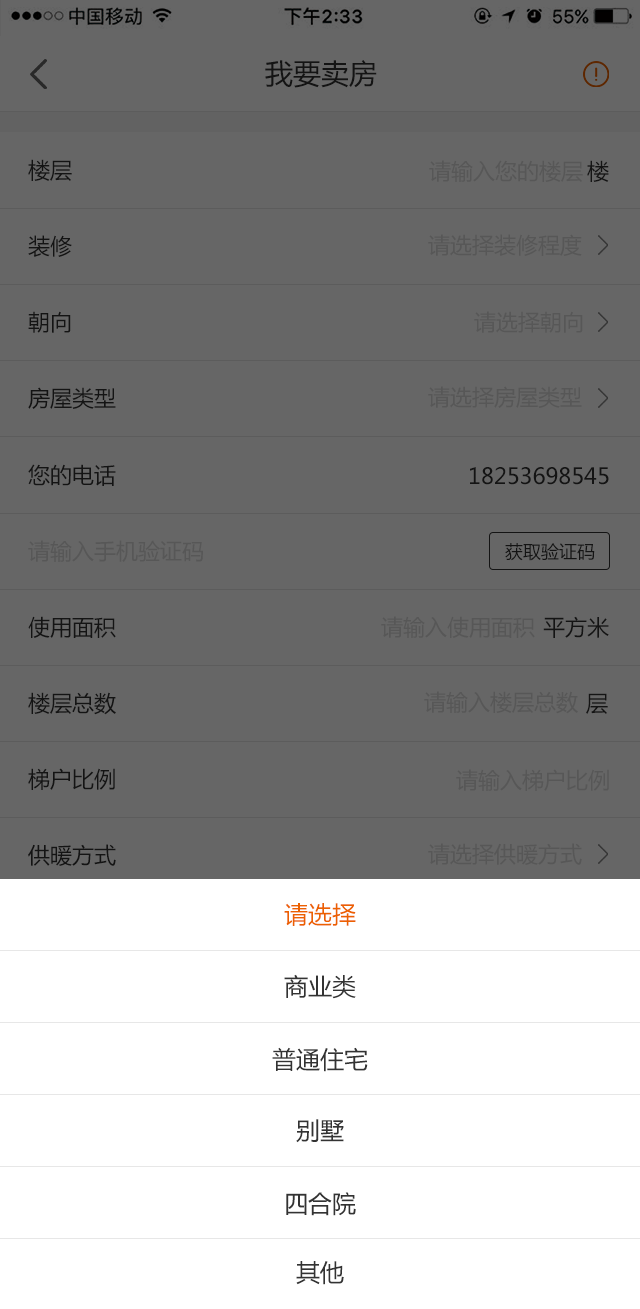
<style>
.page{position:relative;width:640px;height:1309px;background:#666666}
.page>*{position:absolute;margin:0}
.t1{font:28px "MicrosoftYaHei";color:#141414}
.t2{font:22px "MicrosoftYaHei";color:#141414}
.t3{font:22px "MicrosoftYaHei";color:#575757}
.t4{font:18px "MicrosoftYaHei";color:#141414}
.t5{font:24px "MicrosoftYaHei";color:#ec6100}
.t6{font:24px "MicrosoftYaHei";color:#333333}
</style>
<div class="page">
<p class="t1" style="left:265px;top:60px;width:112px;height:28px">我要卖房</p>
<p class="t2" style="left:28px;top:159px;width:44px;height:22px">楼层</p>
<p class="t3" style="left:429px;top:160px;width:154px;height:22px">请输入您的楼层</p>
<p class="t2" style="left:587px;top:160px;width:22px;height:22px">楼</p>
<p class="t2" style="left:28px;top:235px;width:44px;height:22px">装修</p>
<p class="t3" style="left:428px;top:234px;width:154px;height:22px">请选择装修程度</p>
<p class="t2" style="left:28px;top:311px;width:43px;height:22px">朝向</p>
<p class="t3" style="left:474px;top:311px;width:109px;height:22px">请选择朝向</p>
<p class="t2" style="left:28px;top:387px;width:88px;height:22px">房屋类型</p>
<p class="t3" style="left:428px;top:386px;width:154px;height:22px">请选择房屋类型</p>
<p class="t2" style="left:28px;top:464px;width:88px;height:22px">您的电话</p>
<p class="t2" style="left:470px;top:467px;width:139px;height:18px">18253698545</p>
<p class="t3" style="left:28px;top:540px;width:175px;height:22px">请输入手机验证码</p>
<p class="t4" style="left:505px;top:543px;width:90px;height:18px">获取验证码</p>
<p class="t2" style="left:28px;top:616px;width:88px;height:22px">使用面积</p>
<p class="t3" style="left:381px;top:616px;width:154px;height:22px">请输入使用面积</p>
<p class="t2" style="left:543px;top:616px;width:66px;height:22px">平方米</p>
<p class="t2" style="left:28px;top:692px;width:88px;height:23px">楼层总数</p>
<p class="t3" style="left:424px;top:691px;width:154px;height:23px">请输入楼层总数</p>
<p class="t2" style="left:586px;top:693px;width:22px;height:21px">层</p>
<p class="t2" style="left:28px;top:768px;width:87px;height:22px">梯户比例</p>
<p class="t3" style="left:456px;top:769px;width:153px;height:22px">请输入梯户比例</p>
<p class="t2" style="left:28px;top:844px;width:88px;height:22px">供暖方式</p>
<p class="t3" style="left:428px;top:843px;width:154px;height:22px">请选择供暖方式</p>
<p class="t5" style="left:284px;top:903px;width:72px;height:23px">请选择</p>
<p class="t6" style="left:284px;top:974px;width:72px;height:25px">商业类</p>
<p class="t6" style="left:272px;top:1047px;width:96px;height:25px">普通住宅</p>
<p class="t6" style="left:296px;top:1119px;width:48px;height:24px">别墅</p>
<p class="t6" style="left:286px;top:1192px;width:70px;height:24px">四合院</p>
<p class="t6" style="left:296px;top:1261px;width:48px;height:24px">其他</p>
</div>
